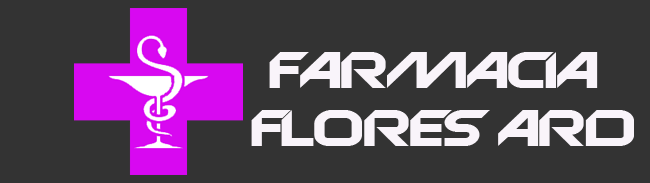
<style>
.page{position:relative;width:650px;height:183px;background:#333333}
.page>*{position:absolute;margin:0}
.t1{font:53.1px/58.3px "Anniversary-Regular";letter-spacing:-0.02em;color:#f9f4fa;scale:1.31 1}
</style>
<div class="page">
<p class="t1" style="left:251px;top:52px;width:383px;height:94px;text-align:center">FARMACIA<br> FLORES ARD</p>
</div>
